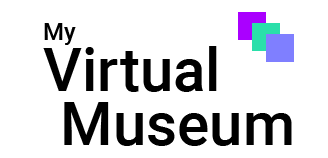
<style>
.page{position:relative;width:328px;height:158px;background:#ffffff}
.page>*{position:absolute;margin:0}
.t1{font:24px "Roboto-Medium";color:#000000}
.t2{font:60px "Roboto-Medium";color:#000000}
</style>
<div class="page">
<p class="t1" style="left:44px;top:23px;width:32px;height:22px">My</p>
<p class="t2" style="left:43px;top:46px;width:174px;height:46px">Virtual</p>
<p class="t2" style="left:64px;top:102px;width:228px;height:44px">Museum</p>
</div>
